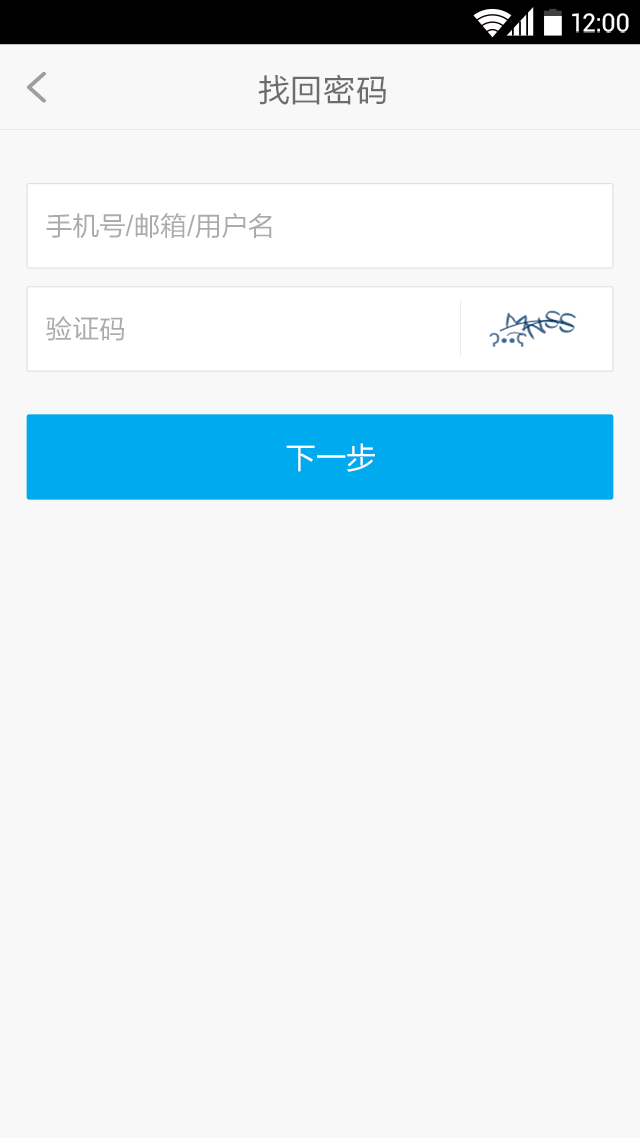
<style>
.page{position:relative;width:640px;height:1138px;background:#f8f8f8}
.page>*{position:absolute;margin:0}
.t1{font:24.9px "Roboto-Regular";color:#ffffff}
.t2{font:32px "FZLTHJW--GB1-0";letter-spacing:0.02em;color:#6c6c6c}
.t3{font:26.7px "FZLTHJW--GB1-0";color:#ababab}
.t4{font:30.2px "FZLTHJW--GB1-0";color:#ffffff}
</style>
<div class="page">
<p class="t1" style="left:572px;top:13px;width:57px;height:20px">12:00</p>
<p class="t2" style="left:258px;top:74px;width:128px;height:31px">找回密码</p>
<p class="t3" style="left:46px;top:213px;width:226px;height:26px">手机号/邮箱/用户名</p>
<p class="t3" style="left:46px;top:316px;width:78px;height:25px">验证码</p>
<p class="t4" style="left:286px;top:443px;width:89px;height:29px">下一步</p>
</div>
